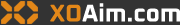
<style>
.page{position:relative;width:180px;height:25px;background:#333333}
.page>*{position:absolute;margin:0}
.t1{font:24px "OxaniumRoman-Bold";color:#ffffff}
.t2{font:24px "OxaniumRoman-Bold";color:#e38718}
</style>
<div class="page">
<p class="t1" style="left:50px;top:3px;width:130px;height:19px"><span class="t2">XO</span>Aim.com</p>
</div>
